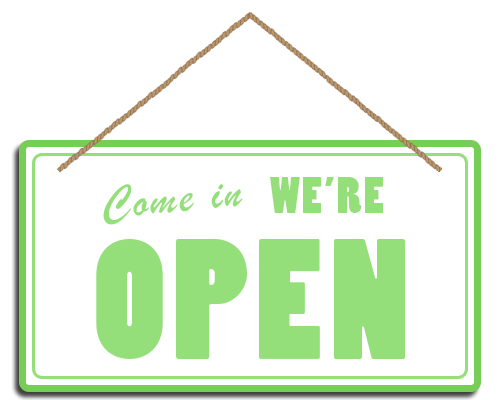
<style>
.page{position:relative;width:500px;height:400px;background:#ffffff}
.page>*{position:absolute;margin:0}
.t1{font:48px "BrushScriptMT";letter-spacing:0.05em;color:#95df7b}
.t2{font:48px "PoplarStd";letter-spacing:0.05em;color:#95df7b}
.t3{font:160px "PoplarStd";letter-spacing:0.05em;color:#95df7b}
</style>
<div class="page">
<p class="t1" style="left:103px;top:184px;width:140px;height:41px;rotate:-5deg">Come in</p>
<p class="t2" style="left:270px;top:177px;width:113px;height:36px">WE’RE</p>
<p class="t3" style="left:96px;top:238px;width:309px;height:121px">OPEN</p>
</div>
